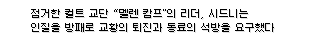
<style>
.page{position:relative;width:320px;height:45px;background:#ffffff}
.page>*{position:absolute;margin:0}
.t1{font:10px/14px "Galmuri9-Regular";color:#000000}
</style>
<div class="page">
<p class="t1" style="left:30px;top:9px;width:244px;height:23px">점거한 컬트 교단 “멜렌 캄프"의 리더, 시드니는 <br>인질을 방패로 교황의 퇴진과 동료의 석방을 요구했다</p>
</div>
